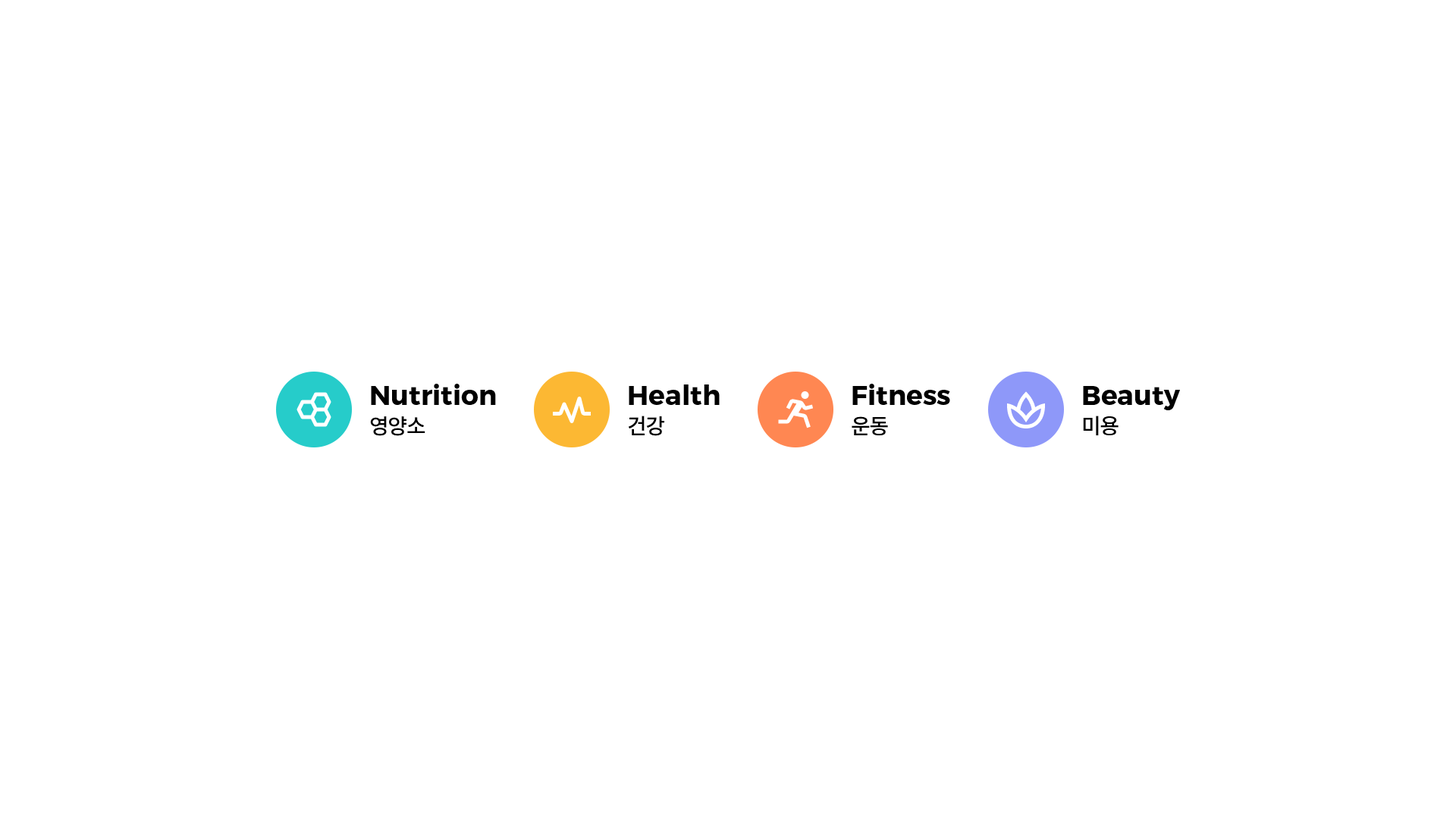
<style>
.page{position:relative;width:1456px;height:819px;background:#ffffff}
.page>*{position:absolute;margin:0}
.t1{font:27.3px "Montserrat-Bold";color:#000000}
.t2{font:21.2px "NotoSansCJKkr-Medium";letter-spacing:-0.05em;color:#000000}
</style>
<div class="page">
<p class="t1" style="left:371px;top:384px;width:125px;height:21px">Nutrition</p>
<p class="t1" style="left:629px;top:384px;width:91px;height:21px">Health</p>
<p class="t1" style="left:852px;top:384px;width:98px;height:21px">Fitness</p>
<p class="t1" style="left:1083px;top:386px;width:97px;height:24px">Beauty</p>
<p class="t2" style="left:370px;top:416px;width:55px;height:20px">영양소</p>
<p class="t2" style="left:628px;top:416px;width:36px;height:20px">건강</p>
<p class="t2" style="left:852px;top:416px;width:36px;height:20px">운동</p>
<p class="t2" style="left:1083px;top:416px;width:36px;height:20px">미용</p>
</div>
